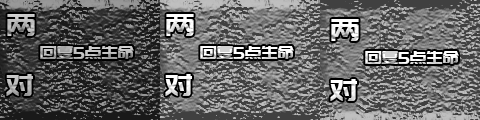
<style>
.page{position:relative;width:480px;height:120px}
.page>*{position:absolute;margin:0}
.t1{font:30px/60px "PangMenZhengDao";letter-spacing:-0.01em;color:#bfbfbf}
.t2{font:30px/60px "PangMenZhengDao";letter-spacing:-0.01em;color:#ffffff}
.t3{font:18px "PangMenZhengDao";letter-spacing:-0.01em}
.t4{font:18px "PangMenZhengDao";letter-spacing:-0.01em;color:#ffffff}
</style>
<div class="page">
<p class="t1" style="left:6px;top:14px;width:29px;height:82px">两<br>对</p>
<p class="t2" style="left:165px;top:14px;width:29px;height:82px">两<br>对</p>
<p class="t2" style="left:330px;top:19px;width:29px;height:82px">两<br>对</p>
<p class="t3" style="left:40px;top:46px;width:94px;height:13px">回复5点生命</p>
<p class="t4" style="left:200px;top:46px;width:94px;height:13px">回复5点生命</p>
<p class="t4" style="left:365px;top:51px;width:94px;height:13px">回复5点生命</p>
</div>
